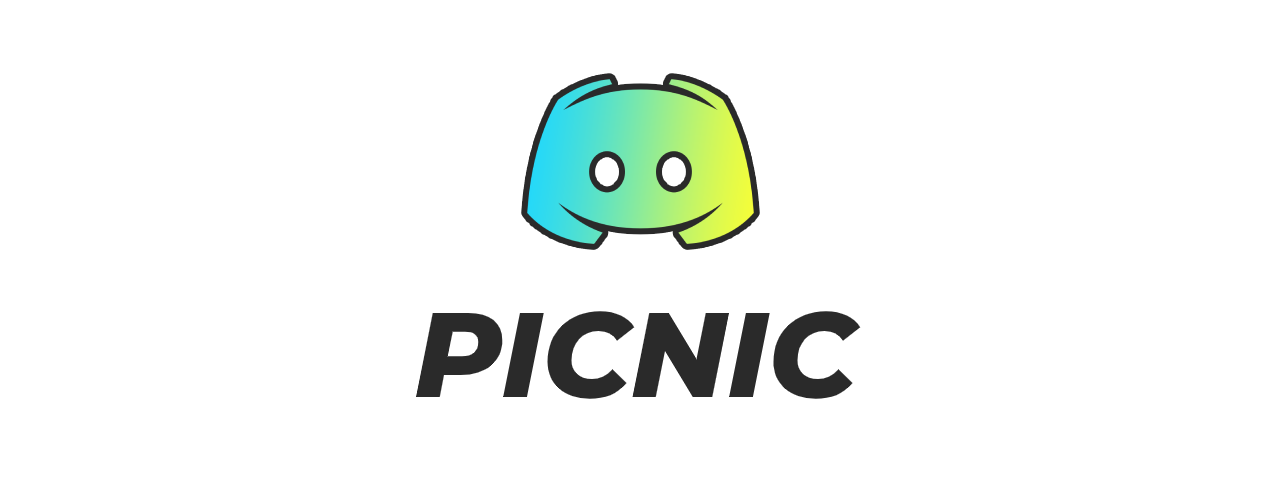
<style>
.page{position:relative;width:1280px;height:500px;background:#ffffff}
.page>*{position:absolute;margin:0}
.t1{font:120px "Montserrat-ExtraBoldItalic";color:#2a2a2a}
</style>
<div class="page">
<p class="t1" style="left:415px;top:311px;width:446px;height:88px">PICNIC</p>
</div>
